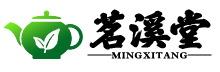
<style>
.page{position:relative;width:220px;height:72px;background:#ffffff}
.page>*{position:absolute;margin:0}
.t1{font:43.3px "FZBANGSHUXINGJW--GB1-0";letter-spacing:-0.22em;color:#000000;scale:1.19 1}
.t2{font:10px "DFPLiJinHeiW8";color:#000000;scale:1.19 1}
</style>
<div class="page">
<p class="t1" style="left:89px;top:9px;width:122px;height:41px">茗溪堂</p>
<p class="t2" style="left:87px;top:52px;width:125px;height:7px">——MINGXITANG——</p>
</div>
